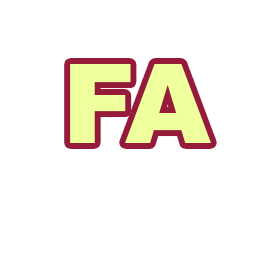
<style>
.page{position:relative;width:256px;height:256px;background:#ffffff}
.page>*{position:absolute;margin:0}
.t1{font:110px "Arial-Black";color:#f0ff9e}
</style>
<div class="page">
<p class="t1" style="left:70px;top:64px;width:141px;height:79px">FA</p>
</div>
